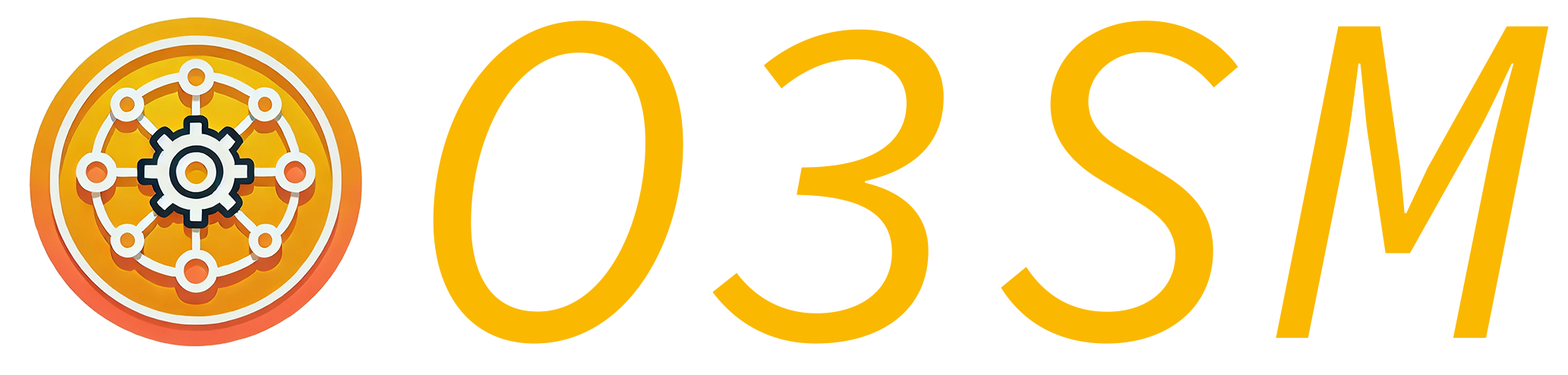
<style>
.page{position:relative;width:1568px;height:375px;background:#ffffff}
.page>*{position:absolute;margin:0}
.t1{font:474.6px "SourceCodePro-It";color:#fab800}
</style>
<div class="page">
<p class="t1" style="left:433px;top:21px;width:1116px;height:323px">O3SM</p>
</div>
